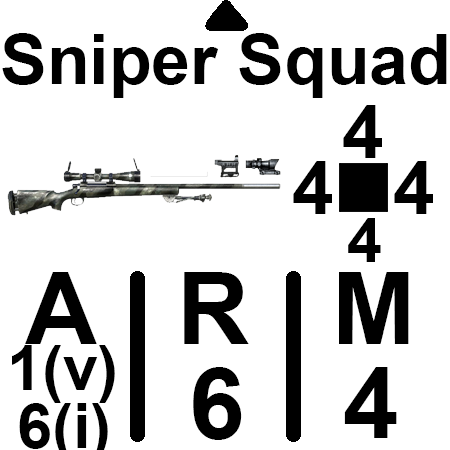
<style>
.page{position:relative;width:450px;height:450px;background:#ffffff}
.page>*{position:absolute;margin:0}
.t1{font:70px "Arial-BoldMT";color:#000000}
.t2{font:75px "Arial-BoldMT";color:#000000}
.t3{font:62.5px "Arial-BoldMT";color:#000000}
.t4{font:100px "Arial-BoldMT";color:#000000}
</style>
<div class="page">
<p class="t1" style="left:2px;top:33px;width:445px;height:65px"><span class="t2"> </span>Sniper Squad</p>
<p class="t2" style="left:343px;top:105px;width:39px;height:53px">4</p>
<p class="t2" style="left:293px;top:161px;width:39px;height:53px">4</p>
<p class="t2" style="left:394px;top:161px;width:39px;height:53px">4</p>
<p class="t3" style="left:348px;top:218px;width:33px;height:44px">4</p>
<p class="t4" style="left:25px;top:272px;width:384px;height:72px">A   R   M</p>
<p class="t3" style="left:12px;top:345px;width:103px;height:58px">1(v)</p>
<p class="t4" style="left:193px;top:367px;width:49px;height:73px">6</p>
<p class="t4" style="left:344px;top:367px;width:53px;height:71px">4</p>
</div>
